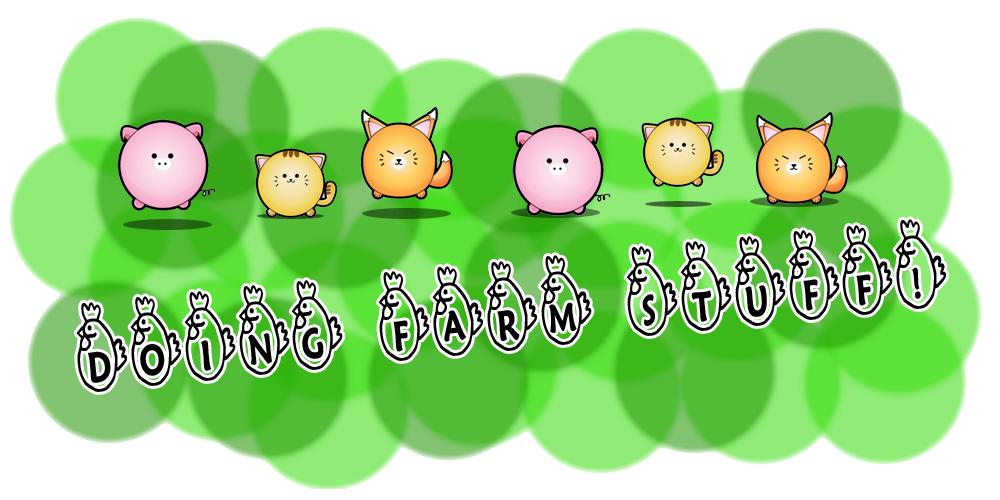
<style>
.page{position:relative;width:1000px;height:500px;background:#ffffff}
.page>*{position:absolute;margin:0}
.t1{font:90px "RMChicky";letter-spacing:0.025em;color:#000000;scale:0.7 1}
</style>
<div class="page">
<p class="t1" style="left:76px;top:219px;width:870px;height:173px;rotate:-6deg">DOING FARM STUFF!</p>
</div>
